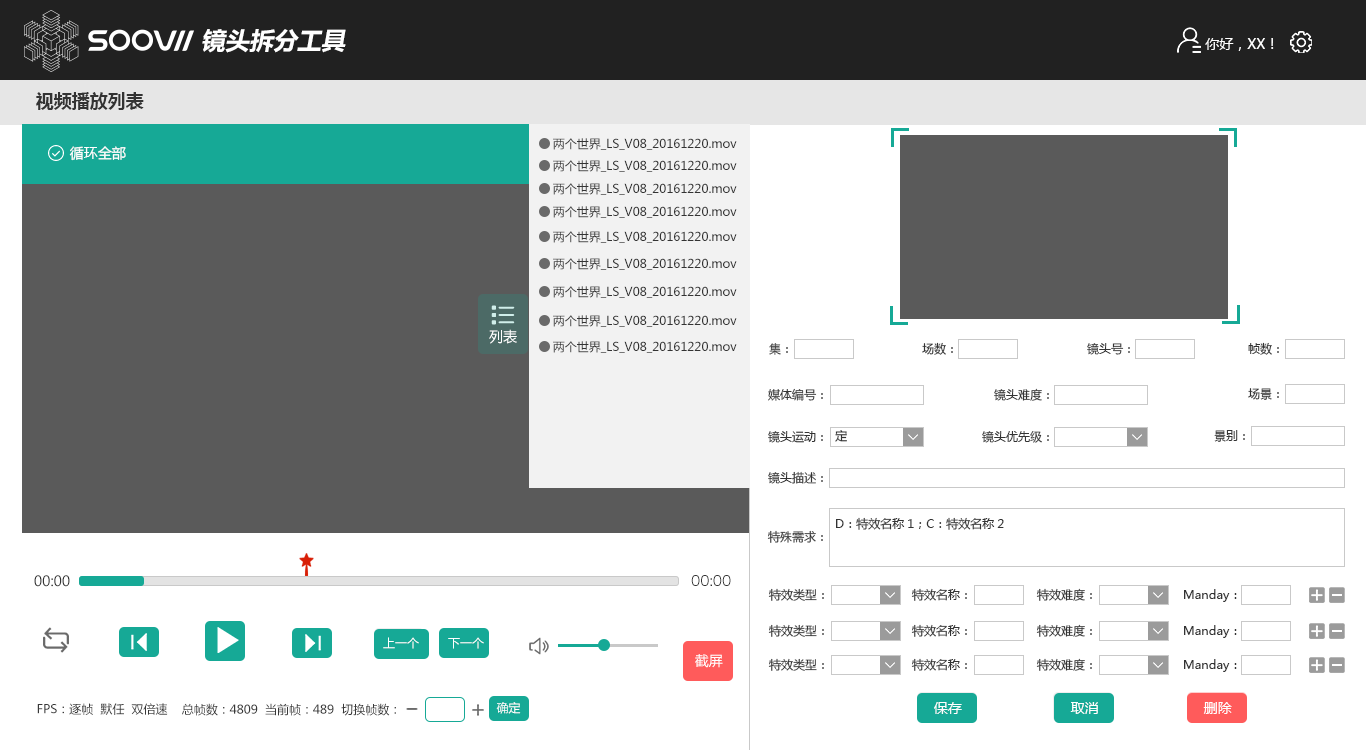
<style>
.page{position:relative;width:1366px;height:750px;background:#ffffff}
.page>*{position:absolute;margin:0}
.t1{font:24px "MicrosoftYaHei-Bold";color:#ffffff;font-style:italic}
.t2{font:14px "MicrosoftYaHei";color:#ffffff}
.t3{font:18px "MicrosoftYaHei-Bold";color:#333333}
.t4{font:12px "MicrosoftYaHei";color:#333333}
.t5{font:12px "MicrosoftYaHei"}
.t6{font:14px "MicrosoftYaHei";color:#333333}
.t7{font:14px "HiraginoSansGB-W3";color:#333333}
.t8{font:12px "MicrosoftYaHei";color:#ffffff}
.t9{font:12px "MicrosoftYaHei";color:#383838}
</style>
<div class="page">
<p class="t1" style="left:202px;top:29px;width:144px;height:24px">镜头拆分工具</p>
<p class="t2" style="left:1205px;top:38px;width:69px;height:13px">你好，XX！</p>
<p class="t3" style="left:36px;top:92px;width:108px;height:18px">视频播放列表</p>
<p class="t2" style="left:69px;top:146px;width:57px;height:15px">循环全部</p>
<p class="t4" style="left:553px;top:138px;width:184px;height:12px">两个世界_LS_V08_20161220.mov</p>
<p class="t4" style="left:553px;top:160px;width:184px;height:12px">两个世界_LS_V08_20161220.mov</p>
<p class="t4" style="left:553px;top:183px;width:184px;height:12px">两个世界_LS_V08_20161220.mov</p>
<p class="t4" style="left:553px;top:206px;width:184px;height:12px">两个世界_LS_V08_20161220.mov</p>
<p class="t4" style="left:553px;top:231px;width:184px;height:12px">两个世界_LS_V08_20161220.mov</p>
<p class="t4" style="left:553px;top:258px;width:184px;height:12px">两个世界_LS_V08_20161220.mov</p>
<p class="t4" style="left:553px;top:286px;width:184px;height:12px">两个世界_LS_V08_20161220.mov</p>
<p class="t4" style="left:553px;top:315px;width:184px;height:12px">两个世界_LS_V08_20161220.mov</p>
<p class="t2" style="left:489px;top:329px;width:28px;height:15px">列表</p>
<p class="t4" style="left:553px;top:341px;width:184px;height:12px">两个世界_LS_V08_20161220.mov</p>
<p class="t4" style="left:922px;top:342px;width:31px;height:13px">场数：</p>
<p class="t4" style="left:1248px;top:342px;width:31px;height:13px">帧数：</p>
<p class="t5" style="left:769px;top:343px;width:19px;height:12px">集：</p>
<p class="t4" style="left:1087px;top:343px;width:43px;height:12px">镜头号：</p>
<p class="t4" style="left:768px;top:388px;width:55px;height:13px">媒体编号：</p>
<p class="t4" style="left:994px;top:388px;width:55px;height:13px">镜头难度：</p>
<p class="t4" style="left:1248px;top:388px;width:31px;height:12px">场景：</p>
<p class="t4" style="left:768px;top:431px;width:55px;height:12px">镜头运动：</p>
<p class="t4" style="left:835px;top:430px;width:12px;height:12px">定</p>
<p class="t4" style="left:982px;top:431px;width:67px;height:12px">镜头优先级：</p>
<p class="t4" style="left:1214px;top:430px;width:31px;height:12px">景别：</p>
<p class="t4" style="left:768px;top:471px;width:55px;height:13px">镜头描述：</p>
<p class="t4" style="left:836px;top:517px;width:168px;height:13px">D：特效名称1；C：特效名称2</p>
<p class="t4" style="left:767px;top:530px;width:56px;height:13px">特殊需求：</p>
<p class="t6" style="left:34px;top:575px;width:36px;height:12px">00:00</p>
<p class="t7" style="left:691px;top:575px;width:40px;height:11px">00:00</p>
<p class="t4" style="left:768px;top:588px;width:56px;height:13px">特效类型：</p>
<p class="t4" style="left:911px;top:588px;width:56px;height:13px">特效名称：</p>
<p class="t4" style="left:1036px;top:588px;width:56px;height:13px">特效难度：</p>
<p class="t4" style="left:1184px;top:589px;width:53px;height:13px">Manday：</p>
<p class="t4" style="left:768px;top:624px;width:56px;height:13px">特效类型：</p>
<p class="t4" style="left:911px;top:624px;width:56px;height:13px">特效名称：</p>
<p class="t4" style="left:1036px;top:624px;width:56px;height:13px">特效难度：</p>
<p class="t4" style="left:1184px;top:625px;width:53px;height:13px">Manday：</p>
<p class="t8" style="left:383px;top:637px;width:36px;height:12px">上一个</p>
<p class="t8" style="left:448px;top:637px;width:36px;height:12px">下一个</p>
<p class="t2" style="left:695px;top:654px;width:28px;height:14px">截屏</p>
<p class="t2" style="left:695px;top:654px;width:28px;height:14px">截屏</p>
<p class="t4" style="left:768px;top:658px;width:56px;height:13px">特效类型：</p>
<p class="t4" style="left:911px;top:658px;width:56px;height:13px">特效名称：</p>
<p class="t4" style="left:1036px;top:658px;width:56px;height:13px">特效难度：</p>
<p class="t4" style="left:1184px;top:659px;width:53px;height:13px">Manday：</p>
<p class="t8" style="left:496px;top:702px;width:25px;height:12px">确定</p>
<p class="t2" style="left:934px;top:702px;width:28px;height:12px">保存</p>
<p class="t2" style="left:1070px;top:702px;width:28px;height:12px">取消</p>
<p class="t2" style="left:1203px;top:702px;width:29px;height:12px">删除</p>
<p class="t9" style="left:37px;top:703px;width:131px;height:12px">FPS：逐帧  默任  双倍速</p>
<p class="t9" style="left:182px;top:703px;width:214px;height:13px">总帧数：4809  当前帧：489  切换帧数：</p>
</div>
